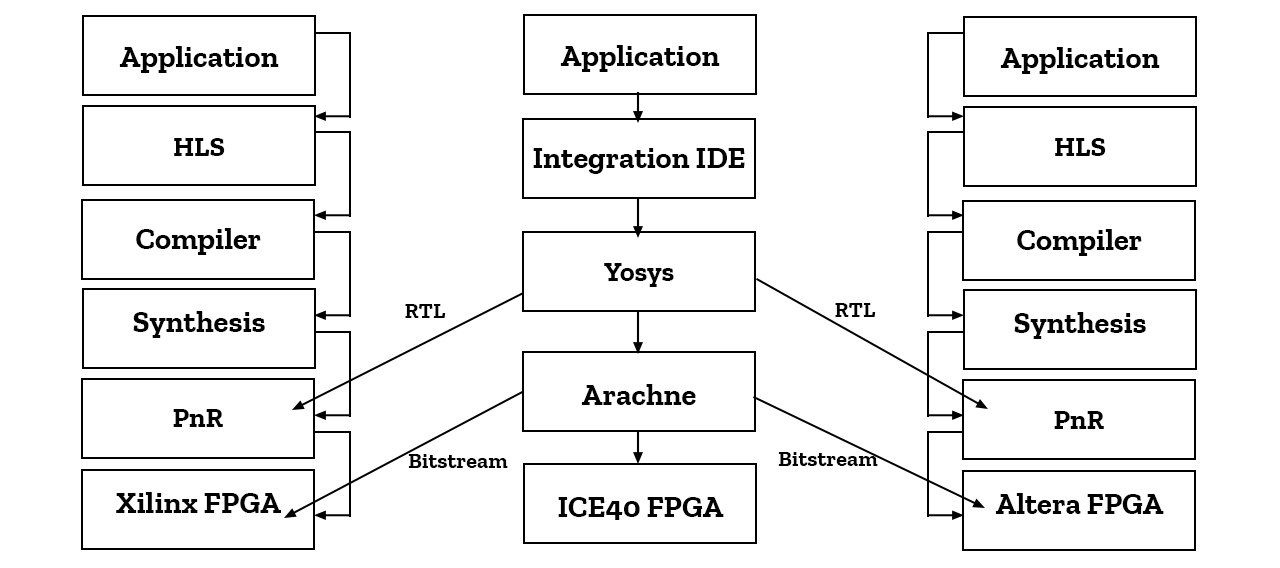
<style>
.page{position:relative;width:1280px;height:568px;background:#ffffff}
.page>*{position:absolute;margin:0}
.t1{font:30.6px "ZillaSlab-Bold";color:#000000}
.t2{font:27.8px "ZillaSlab-Bold";color:#000000}
.t3{font:22.2px "ZillaSlab-Bold";color:#000000}
</style>
<div class="page">
<p class="t1" style="left:119px;top:46px;width:160px;height:27px">Application</p>
<p class="t1" style="left:560px;top:45px;width:160px;height:27px">Application</p>
<p class="t1" style="left:1000px;top:47px;width:160px;height:27px">Application</p>
<p class="t2" style="left:174px;top:138px;width:51px;height:18px">HLS</p>
<p class="t1" style="left:533px;top:148px;width:212px;height:26px">Integration IDE</p>
<p class="t2" style="left:1055px;top:138px;width:51px;height:18px">HLS</p>
<p class="t1" style="left:136px;top:228px;width:125px;height:27px">Compiler</p>
<p class="t1" style="left:1017px;top:229px;width:125px;height:27px">Compiler</p>
<p class="t2" style="left:604px;top:263px;width:70px;height:24px">Yosys</p>
<p class="t3" style="left:405px;top:304px;width:41px;height:14px">RTL</p>
<p class="t3" style="left:835px;top:303px;width:41px;height:14px">RTL</p>
<p class="t1" style="left:133px;top:311px;width:132px;height:27px">Synthesis</p>
<p class="t1" style="left:1014px;top:312px;width:132px;height:27px">Synthesis</p>
<p class="t1" style="left:581px;top:384px;width:115px;height:21px">Arachne</p>
<p class="t2" style="left:173px;top:409px;width:50px;height:18px">PnR</p>
<p class="t2" style="left:1054px;top:411px;width:50px;height:18px">PnR</p>
<p class="t3" style="left:408px;top:454px;width:100px;height:14px">Bitstream</p>
<p class="t3" style="left:778px;top:452px;width:100px;height:14px">Bitstream</p>
<p class="t1" style="left:116px;top:492px;width:165px;height:21px">Xilinx FPGA</p>
<p class="t1" style="left:558px;top:497px;width:166px;height:23px">ICE40 FPGA</p>
<p class="t1" style="left:995px;top:493px;width:169px;height:21px">Altera FPGA</p>
</div>
